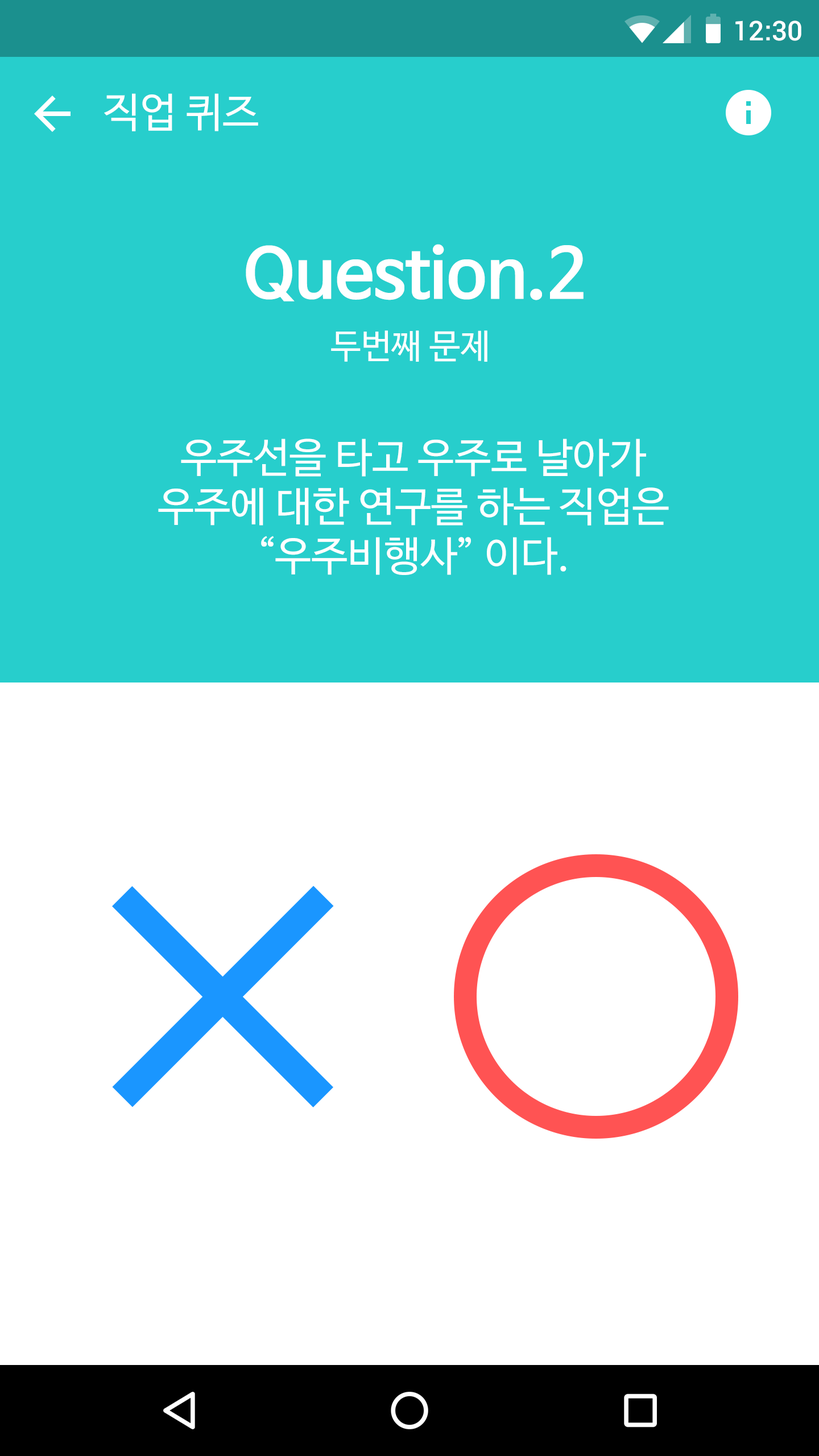
<style>
.page{position:relative;width:819px;height:1456px;background:#ffffff}
.page>*{position:absolute;margin:0}
.t1{font:27.3px "Roboto-Medium";color:#ffffff}
.t2{font:40.9px "NanumBarunGothic";color:#ffffff}
.t3{font:68.2px "NanumBarunGothicBold";color:#ffffff}
.t4{font:34.1px "NanumBarunGothic";color:#ffffff}
</style>
<div class="page">
<p class="t1" style="left:735px;top:20px;width:66px;height:21px">12:30</p>
<p class="t2" style="left:104px;top:93px;width:154px;height:38px">직업 퀴즈</p>
<p class="t3" style="left:246px;top:244px;width:338px;height:57px">Question.2</p>
<p class="t4" style="left:331px;top:330px;width:156px;height:32px">두번째 문제</p>
<p class="t2" style="left:158px;top:439px;width:511px;height:136px;text-align:center">우주선을 타고 우주로 날아가<br>우주에 대한 연구를 하는 직업은<br>“우주비행사” 이다.</p>
</div>
